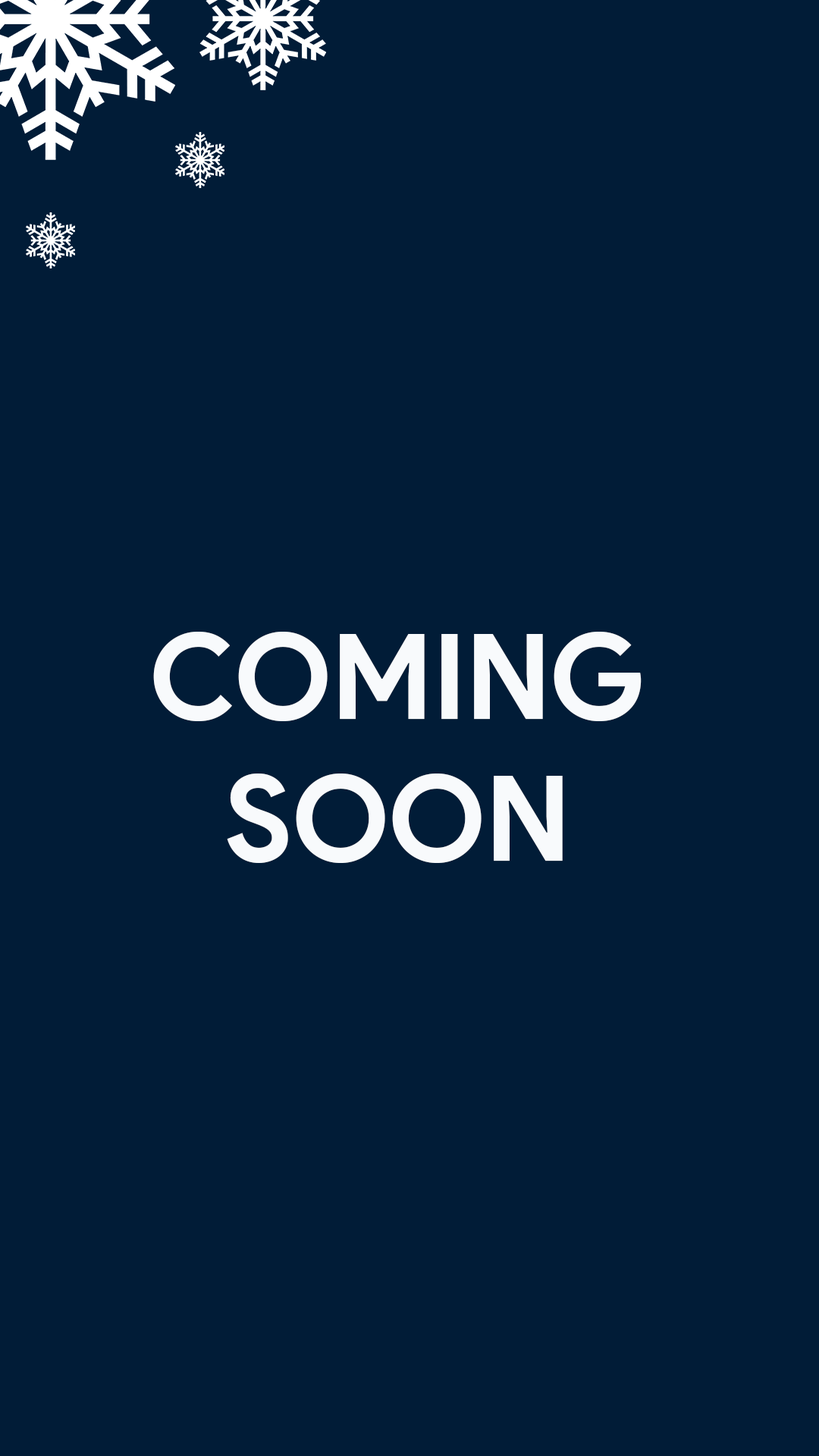
<style>
.page{position:relative;width:819px;height:1456px;background:#011c37}
.page>*{position:absolute;margin:0}
.t1{font:118px "ProductSans-Bold";color:#f8fafc}
</style>
<div class="page">
<p class="t1" style="left:153px;top:632px;width:489px;height:231px;text-align:center">COMING<br>SOON</p>
</div>
